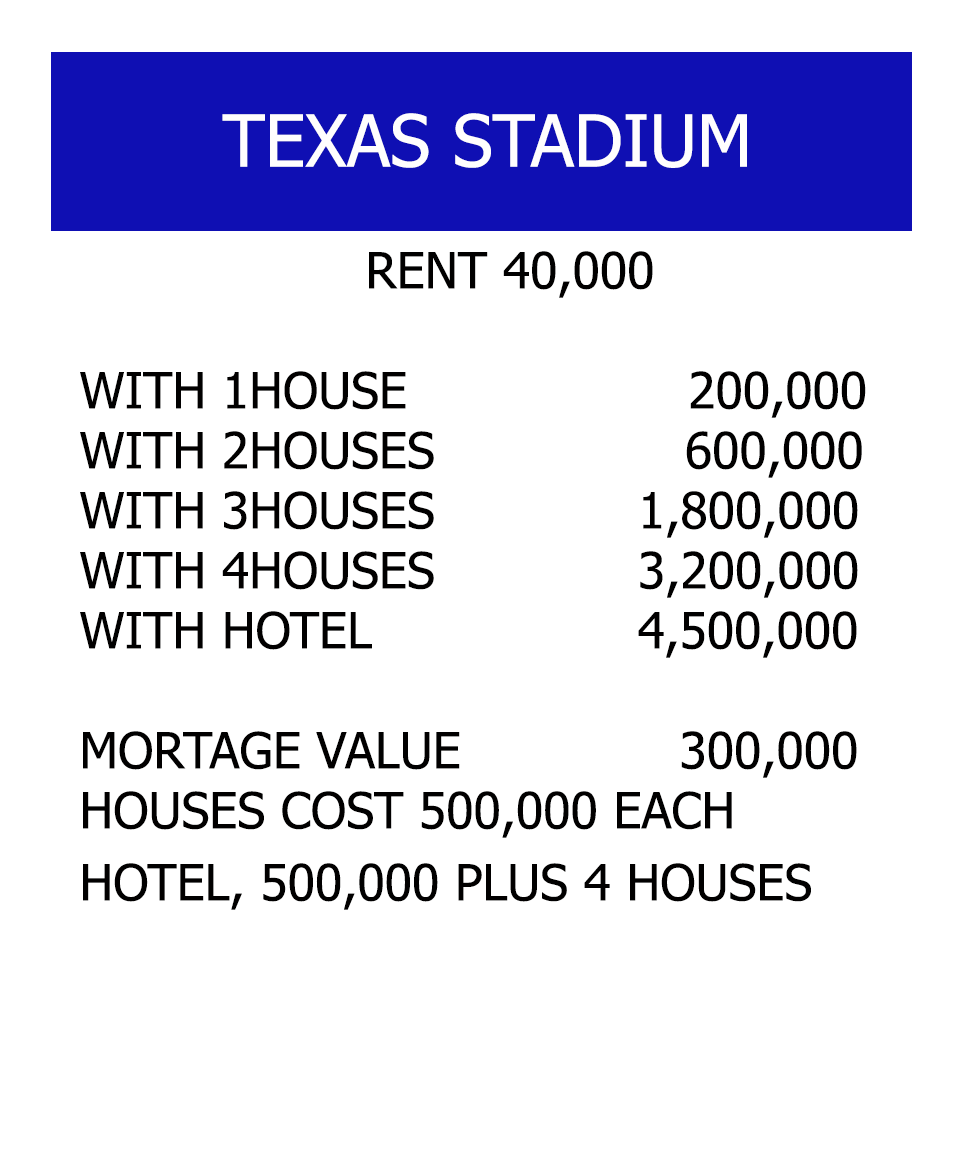
<style>
.page{position:relative;width:966px;height:1164px;background:#ffffff}
.page>*{position:absolute;margin:0}
.t1{font:72px "Tahoma";color:#fffefe}
.t2{font:50px "Tahoma";color:#010000}
</style>
<div class="page">
<p class="t1" style="left:222px;top:113px;width:525px;height:55px">TEXAS STADIUM</p>
<p class="t2" style="left:80px;top:251px;width:786px;height:659px;text-align:center">RENT 40,000<br><br>WITH 1HOUSE                  200,000<br>WITH 2HOUSES                600,000<br>WITH 3HOUSES             1,800,000<br>WITH 4HOUSES             3,200,000<br>WITH HOTEL                 4,500,000<br><br>MORTAGE VALUE              300,000<br>HOUSES COST 500,000 EACH<br>HOTEL, 500,000 PLUS 4 HOUSES</p>
</div>
